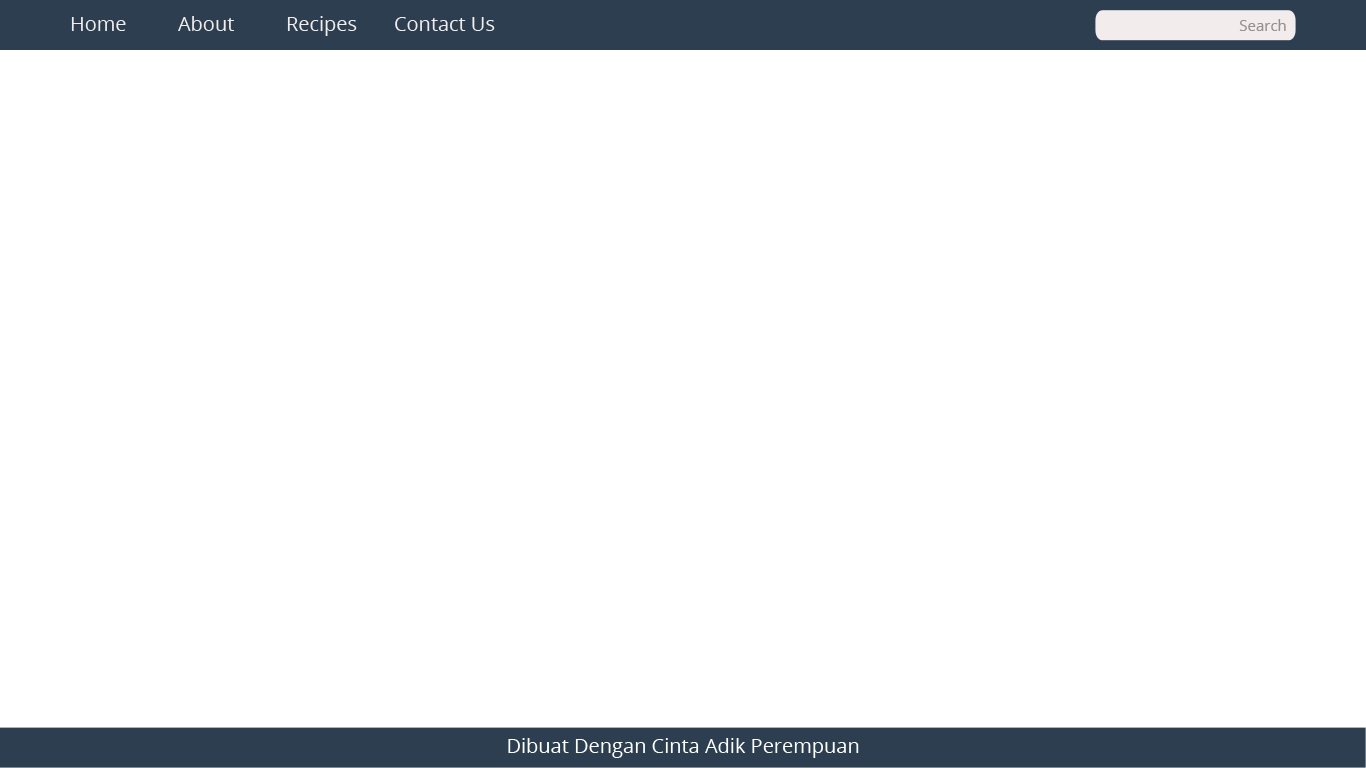
<style>
.page{position:relative;width:1366px;height:768px;background:#ffffff}
.page>*{position:absolute;margin:0}
.t1{font:20px "OpenSans";color:#f2ecec}
.t2{font:15px "OpenSans";color:#949191}
.t3{font:20px "OpenSans";color:#ffffff}
</style>
<div class="page">
<p class="t1" style="left:71px;top:16px;width:424px;height:20px">Home   About  Recipes  Contact Us</p>
<p class="t2" style="left:1239px;top:19px;width:47px;height:12px">Search</p>
<p class="t3" style="left:508px;top:738px;width:351px;height:20px">Dibuat Dengan Cinta Adik Perempuan</p>
</div>
